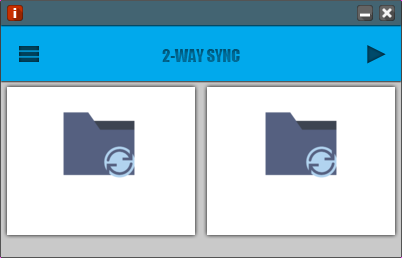
<style>
.page{position:relative;width:402px;height:258px;background:#ffffff}
.page>*{position:absolute;margin:0}
.t1{font:16px "Impact";color:#00658e}
.t2{font:26px "Impact";color:#004462}
</style>
<div class="page">
<p class="t1" style="left:162px;top:49px;width:78px;height:13px">2-WAY SYNC</p>
<p class="t2" style="left:367px;top:45px;width:19px;height:19px">►</p>
</div>
